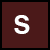
<style>
.page{position:relative;width:50px;height:50px;background:#4b1919}
.page>*{position:absolute;margin:0}
.t1{font:24px "H2gtrE";color:#ffffff}
</style>
<div class="page">
<p class="t1" style="left:14px;top:15px;width:16px;height:19px">S</p>
</div>
